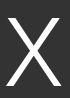
<style>
.page{position:relative;width:70px;height:98px;background:#333333}
.page>*{position:absolute;margin:0}
.t1{font:137.4px "NexaLight";color:#ffffff;scale:0.91 1}
</style>
<div class="page">
<p class="t1" style="left:6px;top:18px;width:56px;height:68px">x</p>
</div>
